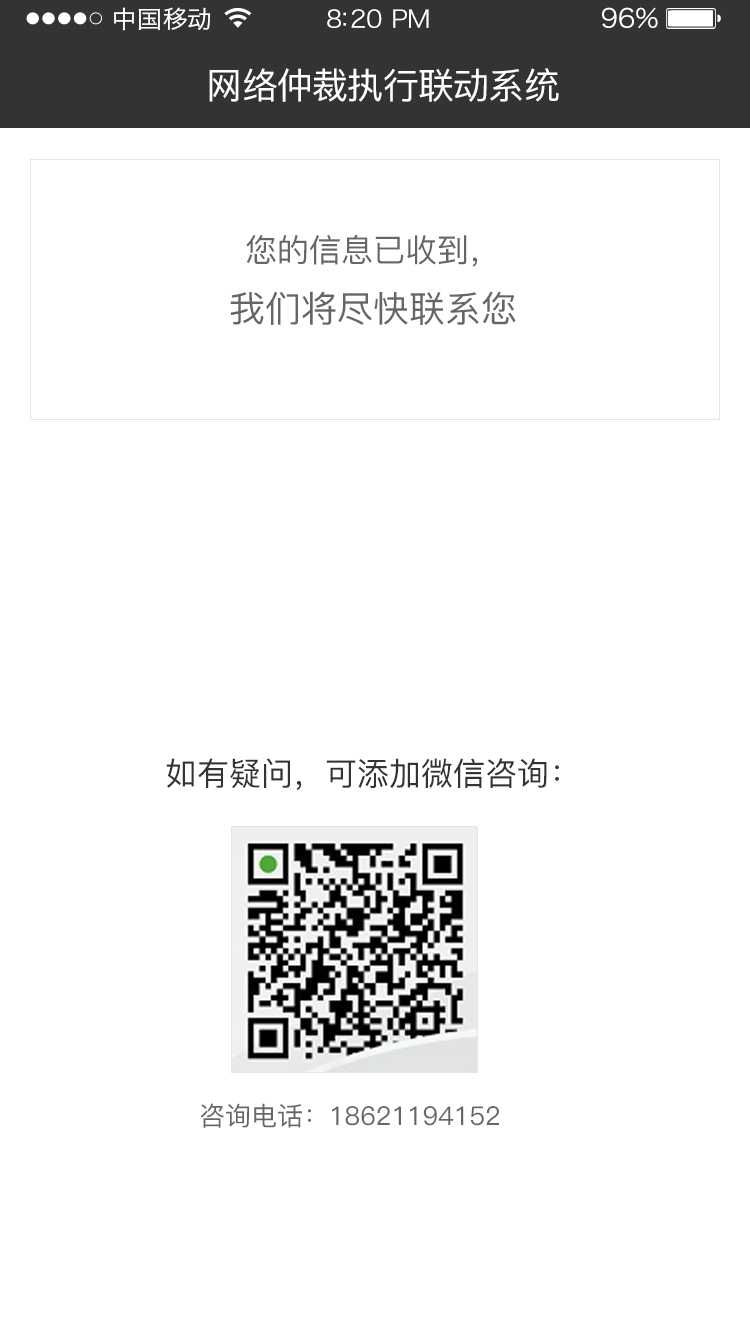
<style>
.page{position:relative;width:750px;height:1334px;background:#ffffff}
.page>*{position:absolute;margin:0}
.t1{font:24px "HiraginoSansGB-W3";letter-spacing:0.02em;color:#ffffff;scale:1.03 1}
.t2{font:24px "HiraginoSansGB-W3";letter-spacing:-0.02em;color:#ffffff;scale:1.03 1}
.t3{font:26.2px "HiraginoSansGB-W3";letter-spacing:-0.02em;color:#ffffff;scale:1.03 1}
.t4{font:36px "PingFang-SC-Medium";letter-spacing:-0.02em;color:#ffffff}
.t5{font:32px/60px "PingFang-SC-Medium";color:#666666}
.t6{font:36px/60px "PingFang-SC-Medium";color:#666666}
.t7{font:32px "PingFang-SC-Medium";color:#333333}
.t8{font:26px "PingFang-SC-Medium";color:#666666}
</style>
<div class="page">
<p class="t1" style="left:114px;top:7px;width:97px;height:24px">中国移动</p>
<p class="t2" style="left:327px;top:9px;width:102px;height:19px">8:20 PM</p>
<p class="t3" style="left:602px;top:7px;width:56px;height:22px">96%</p>
<p class="t4" style="left:209px;top:68px;width:350px;height:34px">网络仲裁执行联动系统</p>
<p class="t5" style="left:230px;top:234px;width:286px;height:91px;text-align:center">您的信息已收到，<br><span class="t6">我们将尽快联系您</span></p>
<p class="t7" style="left:166px;top:758px;width:393px;height:33px">如有疑问，可添加微信咨询：</p>
<p class="t8" style="left:200px;top:1103px;width:299px;height:25px">咨询电话：18621194152</p>
</div>
